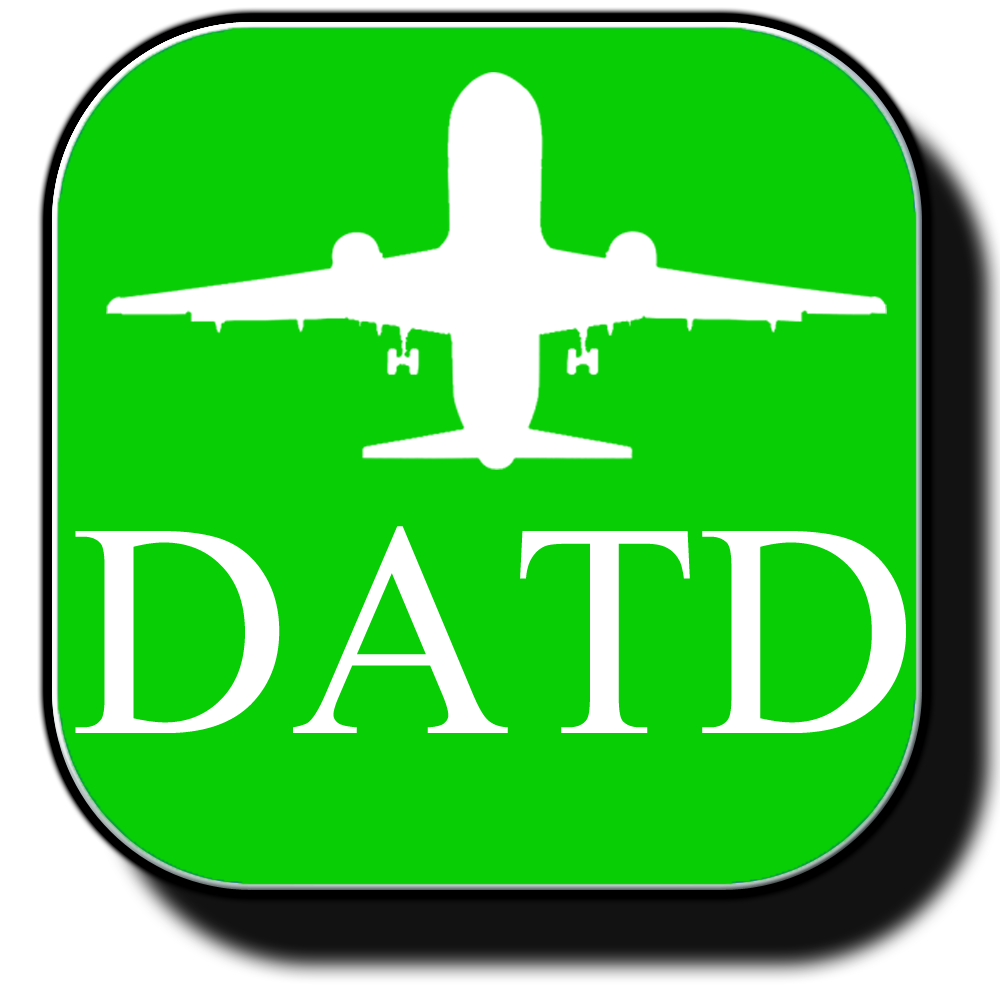
<style>
.page{position:relative;width:1000px;height:1000px;background:#08ce06}
.page>*{position:absolute;margin:0}
.t1{font:305px "TimesNewRomanPSMT";color:#ffffff}
</style>
<div class="page">
<p class="t1" style="left:75px;top:526px;width:831px;height:207px">DATD</p>
</div>
